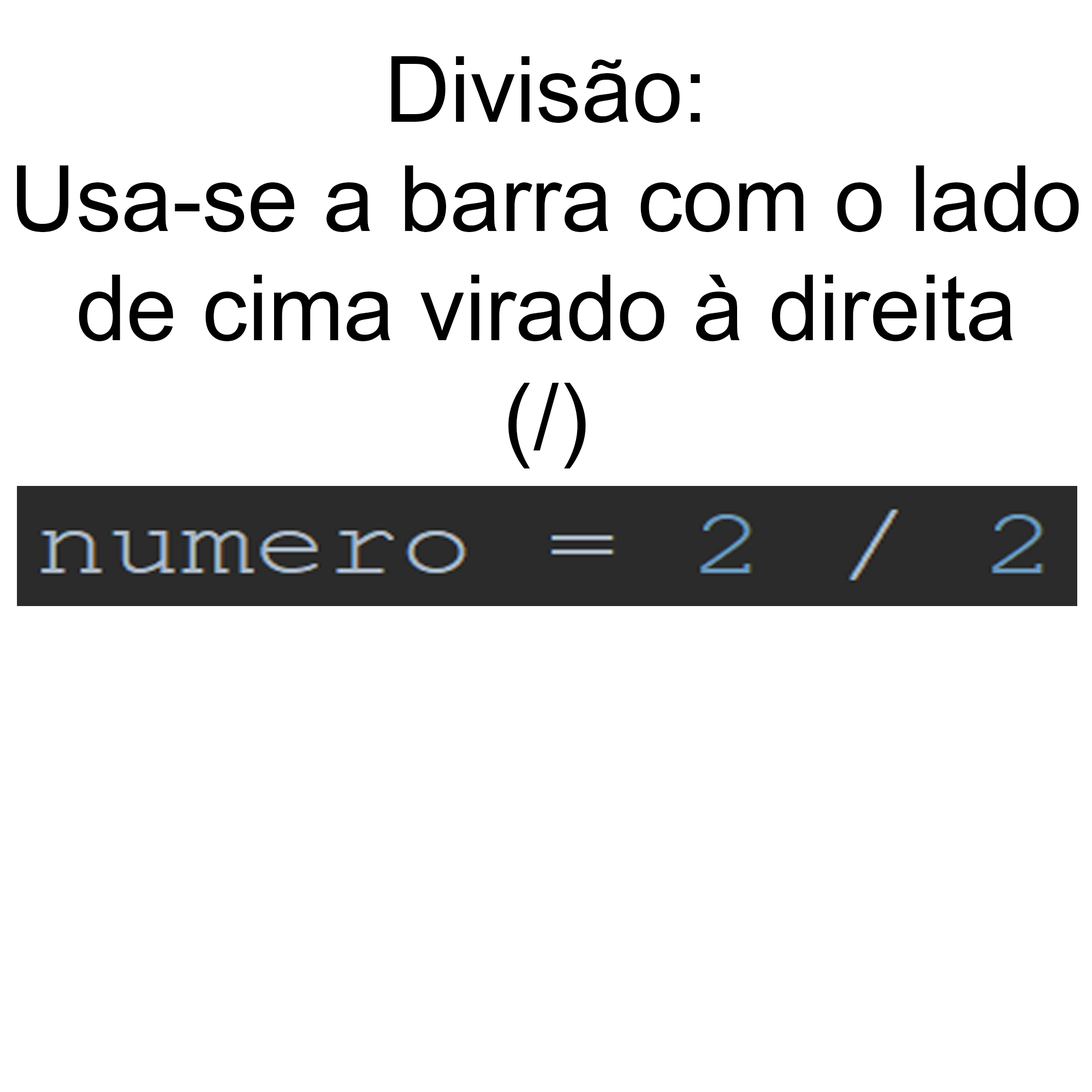
<style>
.page{position:relative;width:1092px;height:1092px;background:#ffffff}
.page>*{position:absolute;margin:0}
.t1{font:91px "ArialMT";color:#000000}
</style>
<div class="page">
<p class="t1" style="left:17px;top:56px;width:1062px;height:412px;text-align:center">Divisão:<br>Usa-se a barra com o lado<br>de cima virado à direita<br>(/)</p>
</div>
